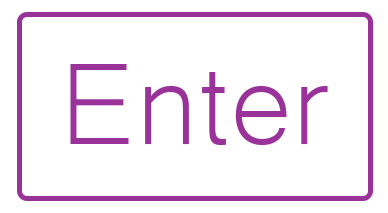
<style>
.page{position:relative;width:388px;height:213px;background:#ffffff}
.page>*{position:absolute;margin:0}
.t1{font:150px "Microsoft-Yi-Baiti";color:#993399}
</style>
<div class="page">
<p class="t1" style="left:70px;top:64px;width:258px;height:81px">Enter</p>
</div>
